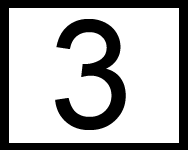
<style>
.page{position:relative;width:188px;height:150px;background:#ffffff}
.page>*{position:absolute;margin:0}
.t1{font:150px "ArialMT";color:#000000}
</style>
<div class="page">
<p class="t1" style="left:55px;top:19px;width:71px;height:111px">3</p>
</div>
